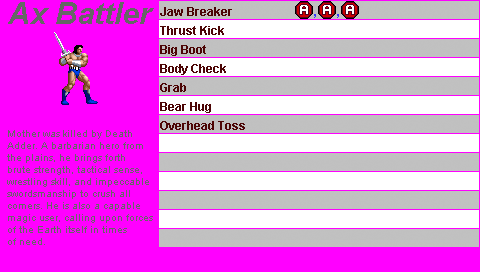
<style>
.page{position:relative;width:480px;height:272px;background:#ff00ff}
.page>*{position:absolute;margin:0}
.t1{font:30px "Arial-BoldItalicMT";color:#666666}
.t2{font:12px "Arial-BoldMT";color:#4c0505}
.t3{font:12px "Arial-BoldMT";color:#3333ff}
.t4{font:10px "ArialMT";color:#666666}
</style>
<div class="page">
<p class="t1" style="left:8px;top:2px;width:146px;height:22px">Ax Battler</p>
<p class="t2" style="left:160px;top:7px;width:72px;height:9px">Jaw Breaker</p>
<p class="t3" style="left:314px;top:14px;width:2px;height:4px">,</p>
<p class="t3" style="left:337px;top:14px;width:2px;height:4px">,</p>
<p class="t2" style="left:160px;top:26px;width:64px;height:9px">Thrust Kick</p>
<p class="t2" style="left:160px;top:45px;width:46px;height:11px">Big Boot</p>
<p class="t2" style="left:160px;top:64px;width:66px;height:11px">Body Check</p>
<p class="t2" style="left:160px;top:83px;width:26px;height:9px">Grab</p>
<p class="t2" style="left:160px;top:102px;width:51px;height:11px">Bear Hug</p>
<p class="t2" style="left:160px;top:121px;width:85px;height:9px">Overhead Toss</p>
<p class="t4" style="left:7px;top:130px;width:146px;height:115px">Mother was killed by Death <br>Adder. A barbarian hero from <br>the plains, he brings forth<br>brute strength, tactical sense, <br>wrestling skill, and impeccable<br>swordsmanship to crush all <br>comers. He is also a capable <br>magic user, calling upon forces <br>of the Earth itself in times <br>of need.</p>
</div>
